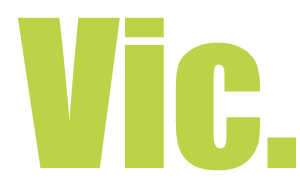
<style>
.page{position:relative;width:300px;height:180px;background:#ffffff}
.page>*{position:absolute;margin:0}
.t1{font:190px "Impact";color:#bad347}
</style>
<div class="page">
<p class="t1" style="left:18px;top:17px;width:278px;height:154px">Vic.</p>
</div>
